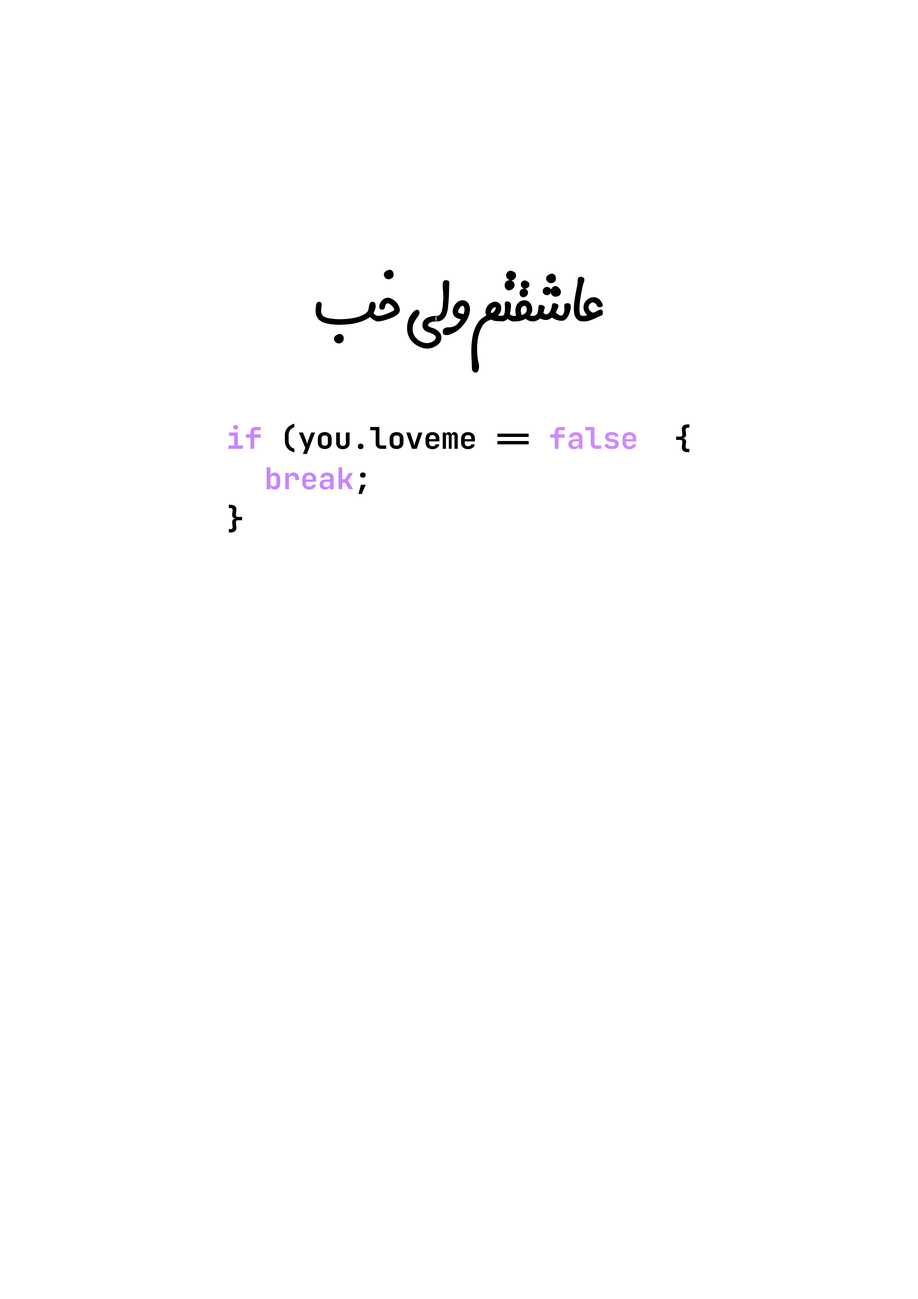
<style>
.page{position:relative;width:918px;height:1299px;background:#ffffff}
.page>*{position:absolute;margin:0}
.t1{font:89.5px "Digi-Gran-Payeh-Bold";color:#000000}
.t2{font:29.9px/40.1px "JetBrainsMono-Bold";color:#000000}
.t3{font:29.9px/40.1px "JetBrainsMono-Bold";color:#c983ff}
.t4{font:29.9px/40.1px "JetBrainsMono-Bold";color:#cf8aff}
.t5{font:29.9px/40.1px "JetBrainsMono-Bold";color:#ffffff}
.t6{font:29.9px/40.1px "JetBrainsMono-Bold";color:#c984ff}
</style>
<div class="page">
<p class="t1" style="left:315px;top:270px;width:288px;height:103px">عاشقتم ولی خب</p>
<p class="t2" style="left:228px;top:424px;width:462px;height:108px"><span class="t3">if </span>(you.loveme == <span class="t4">false</span><span class="t5">) </span>{<br> <span class="t6">break</span>;<br>}</p>
</div>
